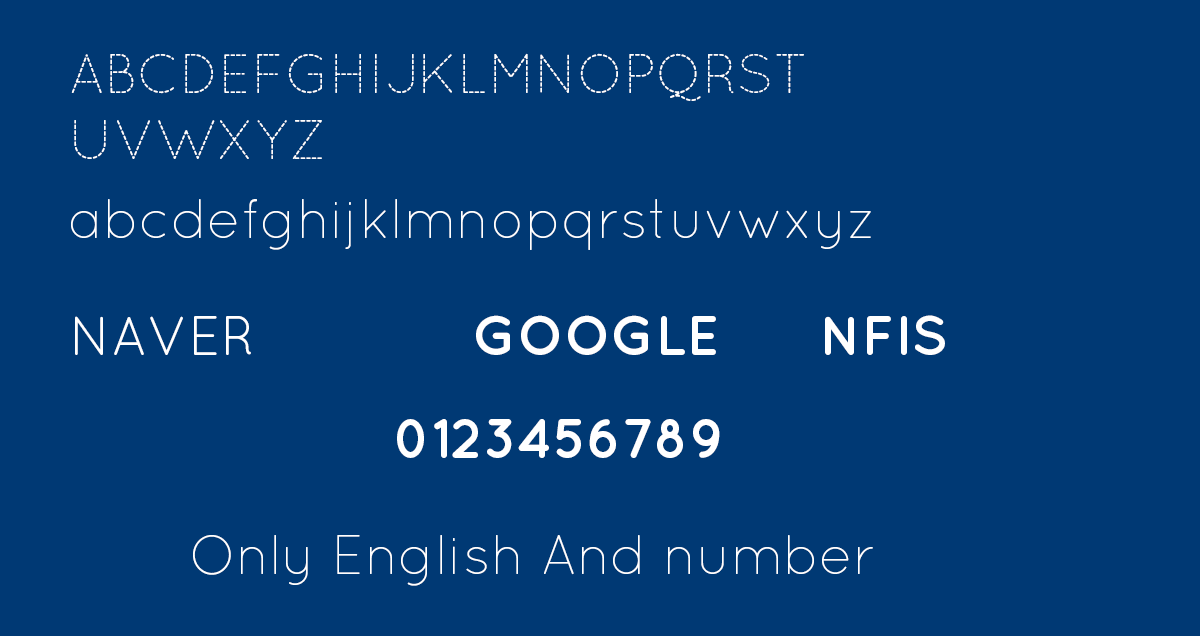
<style>
.page{position:relative;width:1200px;height:636px;background:#003974}
.page>*{position:absolute;margin:0}
.t1{font:55px "QuicksandDash-Regular";color:#ffffff}
.t2{font:55px "QuicksandLight-Regular";color:#ffffff}
.t3{font:55px "QuicksandBook-Regular";color:#ffffff}
.t4{font:55px "QuicksandBold-Regular";color:#ffffff}
</style>
<div class="page">
<p class="t1" style="left:71px;top:53px;width:733px;height:106px">ABCDEFGHIJKLMNOPQRST<br>UVWXYZ</p>
<p class="t2" style="left:71px;top:199px;width:800px;height:51px">abcdefghijklmnopqrstuvwxyz</p>
<p class="t3" style="left:75px;top:316px;width:176px;height:39px">NAVER</p>
<p class="t4" style="left:476px;top:315px;width:240px;height:40px">GOOGLE</p>
<p class="t4" style="left:825px;top:315px;width:120px;height:40px">NFIS</p>
<p class="t4" style="left:397px;top:419px;width:323px;height:39px">0123456789</p>
<p class="t2" style="left:193px;top:535px;width:680px;height:51px">Only English And number</p>
</div>
